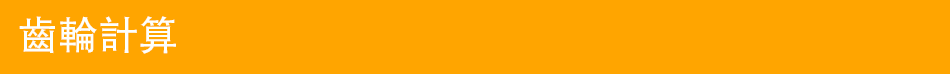
<style>
.page{position:relative;width:950px;height:74px;background:#ffa500}
.page>*{position:absolute;margin:0}
.t1{font:40px "AdobeHeitiStd-Regular";color:#fdfffc}
</style>
<div class="page">
<p class="t1" style="left:19px;top:16px;width:157px;height:38px">齒輪計算</p>
</div>
